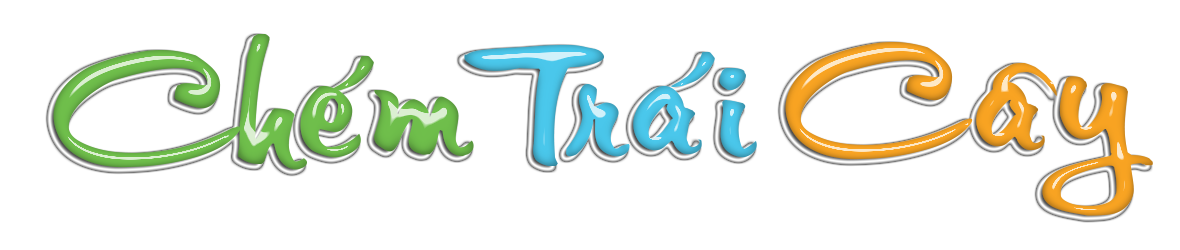
<style>
.page{position:relative;width:1180px;height:250px;background:#ffffff}
.page>*{position:absolute;margin:0}
.t1{font:189.5px "VNI-Thufap3";color:#6dbb4a;scale:0.84 1}
.t2{font:189.5px "VNI-Thufap3";color:#48c3e6;scale:0.84 1}
.t3{font:189.5px "VNI-Thufap3";color:#f3a021;scale:0.84 1}
</style>
<div class="page">
<p class="t1" style="left:53px;top:34px;width:421px;height:136px">Cheùm</p>
<p class="t2" style="left:464px;top:44px;width:293px;height:122px">Traùi</p>
<p class="t3" style="left:785px;top:42px;width:368px;height:174px">Caây</p>
</div>
